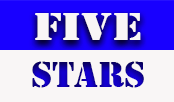
<style>
.page{position:relative;width:174px;height:102px;background:#f9f6f6}
.page>*{position:absolute;margin:0}
.t1{font:40.1px "Stencil";color:#f9f6f6;scale:1.26 1}
.t2{font:37.9px "Stencil"}
</style>
<div class="page">
<p class="t1" style="left:35px;top:13px;width:106px;height:27px">FIVE</p>
<p class="t2" style="left:32px;top:61px;width:112px;height:27px">STARS</p>
</div>
